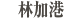
<style>
.page{position:relative;width:81px;height:19px;background:#ffffff}
.page>*{position:absolute;margin:0}
.t1{font:18px "RyuminPro-ExBold";color:#4c4843;scale:0.85 1}
</style>
<div class="page">
<p class="t1" style="left:18px;top:0px;width:46px;height:18px">林加港</p>
</div>
